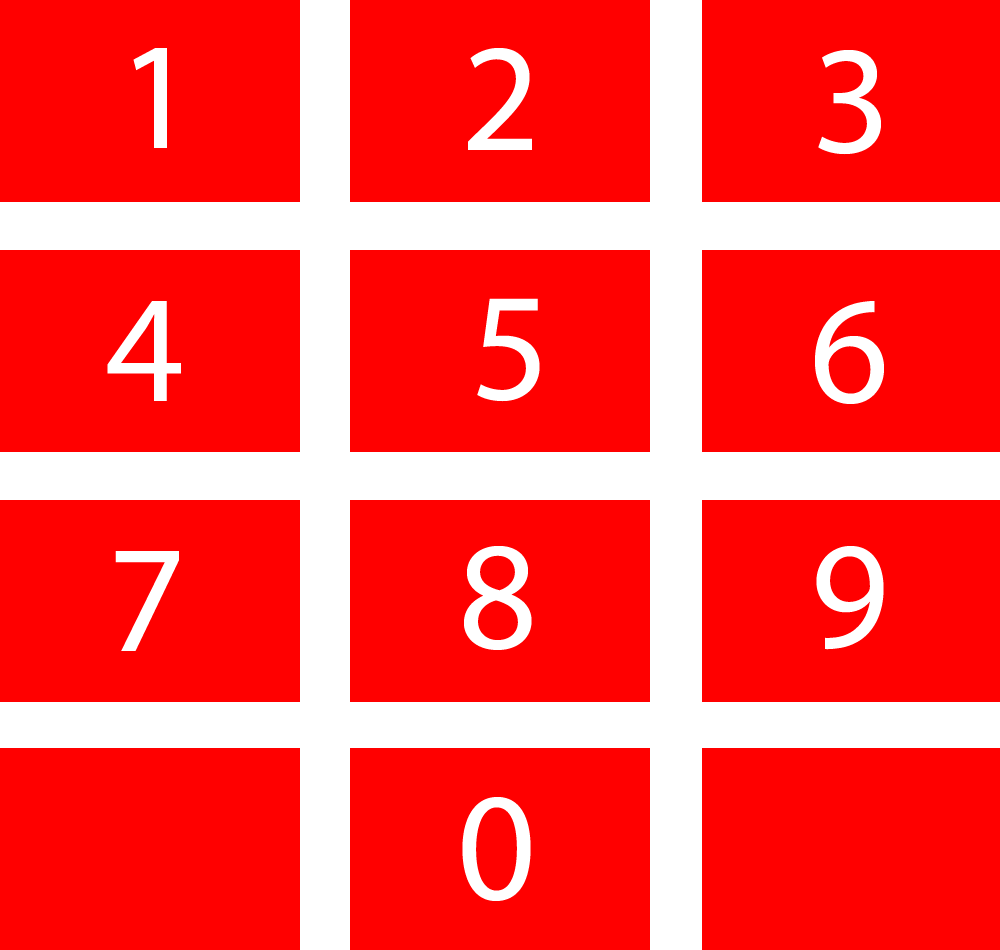
<style>
.page{position:relative;width:1000px;height:950px;background:#ff0000}
.page>*{position:absolute;margin:0}
.t1{font:154.2px "MyriadPro-Regular";color:#ffffff}
</style>
<div class="page">
<p class="t1" style="left:133px;top:48px;width:34px;height:100px">1</p>
<p class="t1" style="left:468px;top:48px;width:64px;height:102px">2</p>
<p class="t1" style="left:818px;top:50px;width:63px;height:105px">3</p>
<p class="t1" style="left:107px;top:301px;width:74px;height:100px">4</p>
<p class="t1" style="left:477px;top:298px;width:63px;height:104px">5</p>
<p class="t1" style="left:815px;top:301px;width:69px;height:103px">6</p>
<p class="t1" style="left:115px;top:551px;width:64px;height:100px">7</p>
<p class="t1" style="left:464px;top:546px;width:68px;height:104px">8</p>
<p class="t1" style="left:816px;top:546px;width:68px;height:104px">9</p>
<p class="t1" style="left:462px;top:797px;width:69px;height:104px">0</p>
</div>
